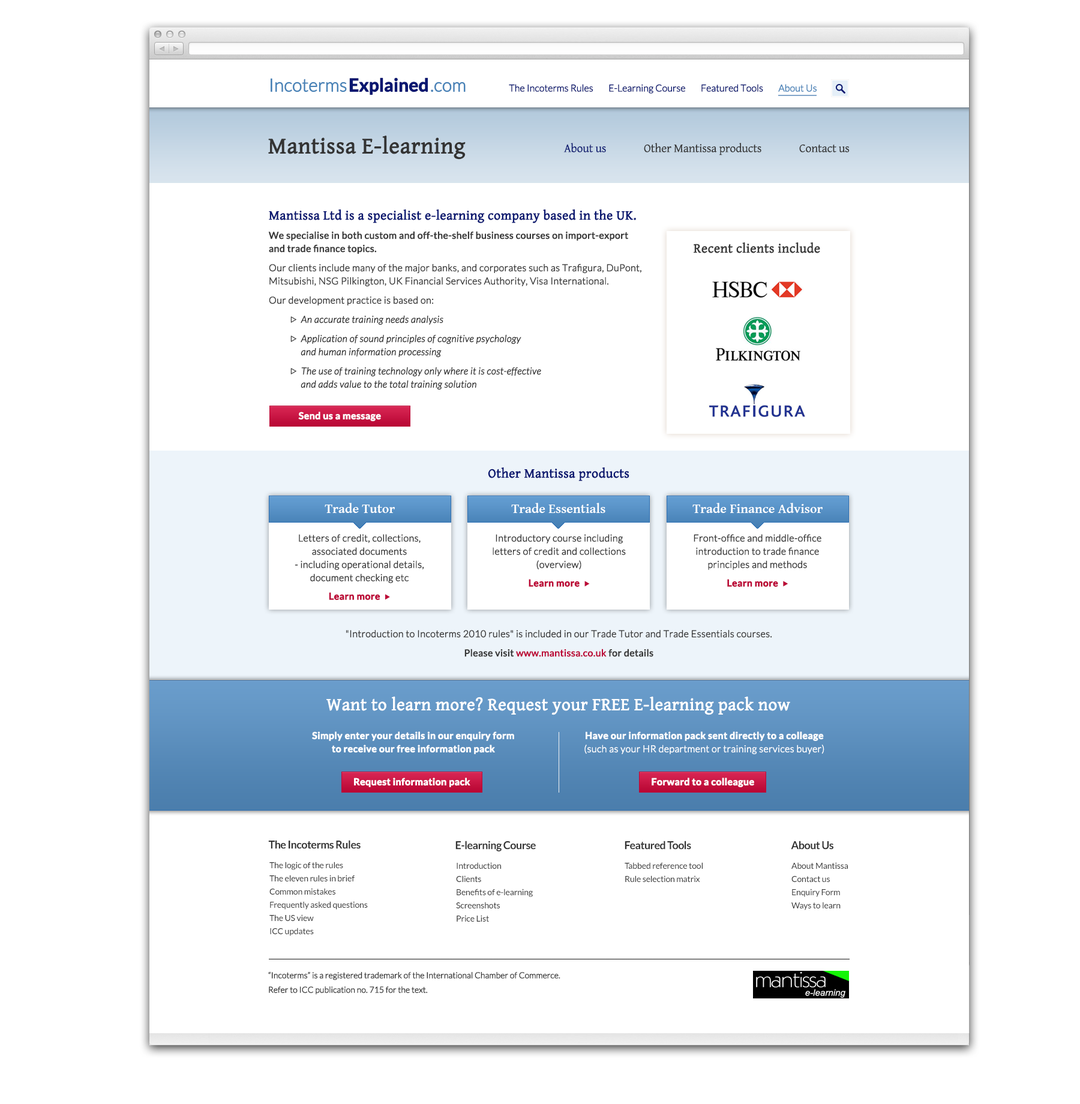
<style>
.page{position:relative;width:1080px;height:1104px;background:#ffffff}
.page>*{position:absolute;margin:0}
.t1{font:18px "Lato-Light";letter-spacing:-0.02em;color:#4983b7;font-weight:bold}
.t2{font:18px "Lato-Bold";letter-spacing:-0.02em;color:#091770;font-weight:bold}
.t3{font:18px "Lato-Light";letter-spacing:-0.02em;color:#4882b7;font-weight:bold}
.t4{font:14.4px "Lato-Regular";letter-spacing:-0.02em;color:#ffffff;font-weight:bold}
.t5{font:14.4px "Lato-Regular";letter-spacing:-0.02em;color:#ffffff;text-transform:uppercase;font-weight:bold}
.t6{font:9.6px "Lato-Light";letter-spacing:-0.02em;color:#091770;font-weight:bold}
.t7{font:9.6px "Lato-Light";letter-spacing:-0.02em;color:#4882b7;font-weight:bold}
.t8{font:22.8px "GentiumBasic";color:#333333;font-weight:bold}
.t9{font:25.9px "GentiumBasic";letter-spacing:-0.02em;color:#ffffff;text-transform:uppercase;font-weight:bold}
.t10{font:12px "GentiumBasic";letter-spacing:-0.01em;color:#333333}
.t11{font:12px "GentiumBasic";letter-spacing:-0.01em;color:#091770}
.t12{font:9.6px/13.2px "Lato-Light";color:#383838;font-weight:bold}
.t13{font:13.2px/13.2px "GentiumBasic";color:#091770;font-weight:bold}
.t14{font:9.6px/13.2px "Lato-Regular";color:#383838;font-weight:bold}
.t15{font:7.2px/13.2px "Wingdings3";color:#383838;font-weight:bold}
.t16{font:9.6px/13.2px "Lato-LightItalic";color:#313131;font-weight:bold}
.t17{font:13.2px "GentiumBasic";color:#383838;font-weight:bold}
.t18{font:9.6px "Lato-Bold";color:#ffffff;font-weight:bold}
.t19{font:9.6px/13.2px "Lato-Regular";color:#bc0937;font-weight:bold}
.t20{font:13.2px "GentiumBasic-Bold";color:#ffffff}
.t21{font:9.6px/13.2px "Lato-Light";color:#333333;font-weight:bold}
.t22{font:9.6px/14.4px "Lato-Bold";color:#bc0937;font-weight:bold}
.t23{font:6px/15.6px "Wingdings3";color:#bc0937;font-weight:bold}
.t24{font:9.6px/15.6px "Lato-Bold";color:#bc0937;font-weight:bold}
.t25{font:9.6px/13.2px "Lato-Bold";color:#bb0836;font-weight:bold}
.t26{font:6px/15.6px "Wingdings3";color:#bb0836;font-weight:bold}
.t27{font:17.5px "GentiumBasic";color:#ffffff;font-weight:bold}
.t28{font:13.2px "GentiumBasic";letter-spacing:-0.02em;color:#ffffff;text-transform:uppercase;font-weight:bold}
.t29{font:9.6px/13.2px "Lato-Bold";color:#ffffff;font-weight:bold}
.t30{font:9.6px/13.2px "Lato-Light";color:#ffffff;font-weight:bold}
.t31{font:10.8px "Lato-Bold";letter-spacing:-0.03em;color:#333333}
.t32{font:8.4px/13.2px "Lato-Regular";letter-spacing:-0.01em;color:#333333}
.t33{font:8.4px/14.5px "Lato-Light";letter-spacing:-0.02em;color:#333333;font-weight:bold}
</style>
<div class="page">
<p class="t1" style="left:271px;top:77px;width:195px;height:18px">Incoterms<span class="t2">Explained</span><span class="t3">.com<br></span><span class="t4"><br></span><span class="t5"></span></p>
<p class="t6" style="left:509px;top:84px;width:308px;height:10px">The Incoterms Rules        E-Learning Course        Featured Tools        <span class="t7">About Us</span></p>
<p class="t8" style="left:268px;top:135px;width:198px;height:25px">Mantissa E-learning<br><span class="t9"></span></p>
<p class="t10" style="left:563px;top:143px;width:287px;height:12px"><span class="t11">About us               </span>Other Mantissa products               Contact us</p>
<p class="t12" style="left:268px;top:209px;width:373px;height:181px"><span class="t13">Mantissa Ltd is a specialist e-learning company based in the UK.<br></span><span class="t14">We specialise in both custom and off-the-shelf business courses on import-export <br>and trade finance topics.<br></span>Our clients include many of the major banks, and corporates such as Trafigura, DuPont, Mitsubishi, NSG Pilkington, UK Financial Services Authority, Visa International.<br>Our development practice is based on:<br> <span class="t15">w  </span><span class="t16">An accurate training needs analysis<br> </span><span class="t15">w  </span><span class="t16">Application of sound principles of cognitive psychology  <br>      and human information processing<br> </span><span class="t15">w  </span><span class="t16">The use of training technology only where it is cost-effective  <br>      and adds value to the total training solution</span></p>
<p class="t17" style="left:694px;top:242px;width:126px;height:11px">Recent clients include</p>
<p class="t18" style="left:298px;top:412px;width:83px;height:9px">Send us a message</p>
<p class="t12" style="left:346px;top:467px;width:426px;height:190px;text-align:center"><span class="t13">Other Mantissa products<br><br><br><br><br><br><br><br></span>"Introduction to Incoterms 2010 rules" is included in our Trade Tutor and Trade Essentials courses.<br><span class="t14">Please visit </span><span class="t19">www.mantissa.co.uk</span><span class="t14"> for details</span></p>
<p class="t20" style="left:325px;top:503px;width:70px;height:10px">Trade Tutor</p>
<p class="t20" style="left:511px;top:503px;width:94px;height:10px">Trade Essentials</p>
<p class="t20" style="left:692px;top:503px;width:131px;height:10px">Trade Finance Advisor</p>
<p class="t21" style="left:295px;top:534px;width:129px;height:66px;text-align:center">Letters of credit, collections, <br>associated documents<br>- including operational details, <br>document checking etc<br><span class="t22">Learn more  </span><span class="t23">u</span></p>
<p class="t21" style="left:493px;top:534px;width:133px;height:53px;text-align:center">Introductory course including <br>letters of credit and collections <br>(overview)<br><span class="t24">Learn more  </span><span class="t23">u</span></p>
<p class="t21" style="left:694px;top:534px;width:127px;height:53px;text-align:center">Front-office and middle-office introduction to trade finance principles and methods <br><span class="t25">Learn more  </span><span class="t26">u</span></p>
<p class="t27" style="left:326px;top:696px;width:464px;height:19px">Want to learn more? Request your FREE E-learning pack now<br><span class="t28"></span></p>
<p class="t29" style="left:312px;top:731px;width:202px;height:23px;text-align:center">Simply enter your details in our enquiry form <br>to receive our free information pack</p>
<p class="t30" style="left:584px;top:731px;width:240px;height:23px;text-align:center"><span class="t29">Have our information pack sent directly to a colleage<br></span>(such as your HR department or training services buyer)</p>
<p class="t18" style="left:354px;top:778px;width:116px;height:9px">Request information pack</p>
<p class="t18" style="left:652px;top:778px;width:102px;height:9px">Forward to a colleague</p>
<p class="t31" style="left:268px;top:840px;width:93px;height:9px">The Incoterms Rules</p>
<p class="t31" style="left:455px;top:841px;width:81px;height:10px">E-learning Course</p>
<p class="t31" style="left:625px;top:841px;width:66px;height:9px">Featured Tools</p>
<p class="t31" style="left:791px;top:841px;width:42px;height:9px">About Us</p>
<p class="t32" style="left:269px;top:862px;width:99px;height:74px">The logic of the rules<br>The eleven rules in brief<br>Common mistakes<br>Frequently asked questions<br>The US view<br>ICC updates</p>
<p class="t32" style="left:456px;top:862px;width:77px;height:60px">Introduction<br>Clients<br>Benefits of e-learning<br>Screenshots<br>Price List</p>
<p class="t32" style="left:625px;top:862px;width:78px;height:20px">Tabbed reference tool <br>Rule selection matrix</p>
<p class="t32" style="left:791px;top:862px;width:57px;height:48px">About Mantissa<br>Contact us<br>Enquiry Form<br>Ways to learn</p>
<p class="t33" style="left:268px;top:971px;width:292px;height:24px">“Incoterms” is a registered trademark of the International Chamber of Commerce. <br>Refer to ICC publication no. 715 for the text.</p>
</div>
